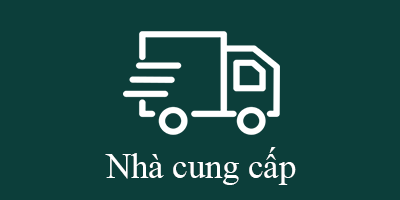
<style>
.page{position:relative;width:400px;height:200px;background:#0c3e3a}
.page>*{position:absolute;margin:0}
.t1{font:34.5px "TimesNewRomanPSMT";color:#ffffff}
</style>
<div class="page">
<p class="t1" style="left:105px;top:147px;width:191px;height:38px">Nhà cung cấp</p>
</div>
